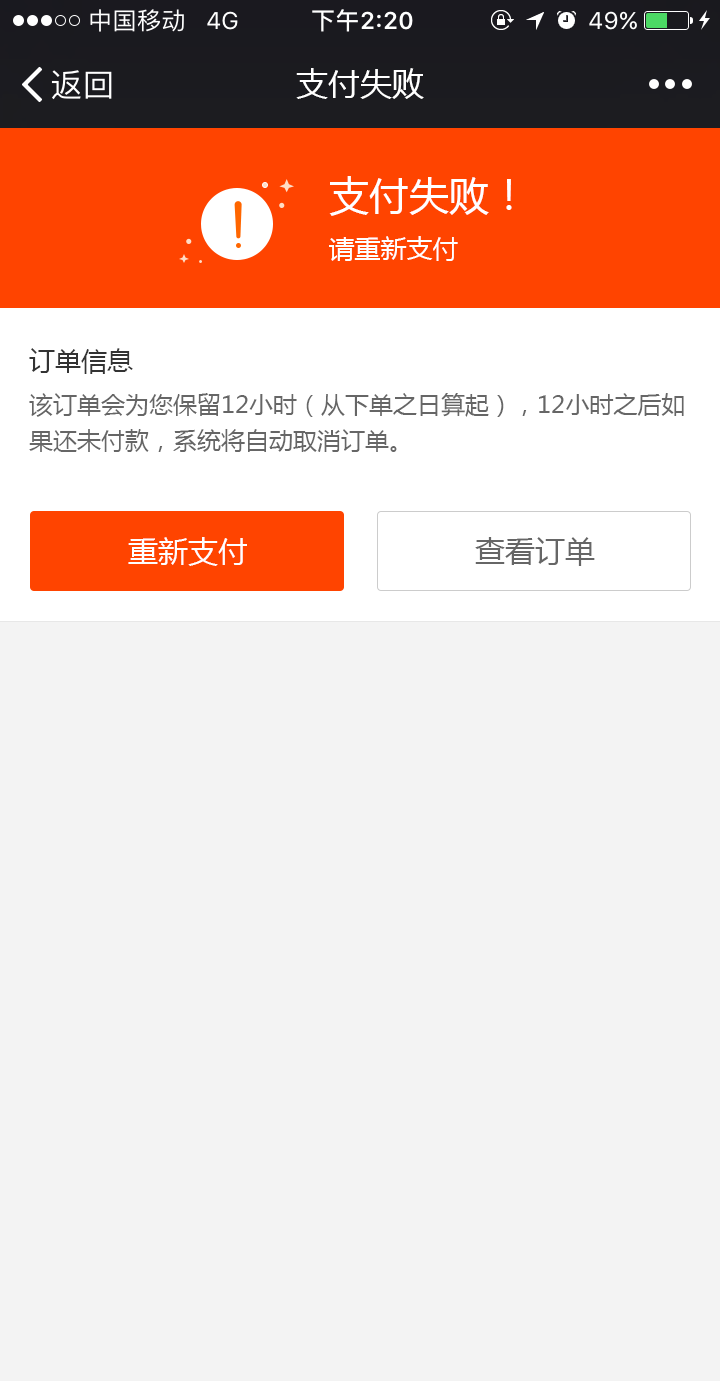
<style>
.page{position:relative;width:720px;height:1381px;background:#f3f3f3}
.page>*{position:absolute;margin:0}
.t1{font:32px "MicrosoftYaHei";color:#ffffff}
.t2{font:40px/60px "MicrosoftYaHei";color:#ffffff}
.t3{font:26px/36px "MicrosoftYaHei";color:#ffffff}
.t4{font:26px "MicrosoftYaHei";color:#333333}
.t5{font:24px/36px "MicrosoftYaHei";color:#666666}
.t6{font:30px "MicrosoftYaHei";color:#fffefe}
.t7{font:30px "MicrosoftYaHei";color:#666666}
</style>
<div class="page">
<p class="t1" style="left:296px;top:68px;width:128px;height:31px">支付失败</p>
<p class="t2" style="left:329px;top:176px;width:183px;height:85px">支付失败！<br><span class="t3">请重新支付</span></p>
<p class="t4" style="left:29px;top:348px;width:104px;height:26px">订单信息</p>
<p class="t5" style="left:29px;top:393px;width:655px;height:59px">该订单会为您保留12小时（从下单之日算起），12小时之后如<br>果还未付款，系统将自动取消订单。</p>
<p class="t6" style="left:128px;top:537px;width:119px;height:29px">重新支付</p>
<p class="t7" style="left:475px;top:537px;width:120px;height:29px">查看订单</p>
</div>
